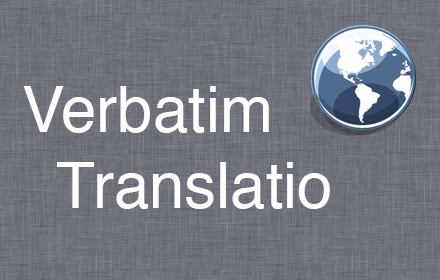
<style>
.page{position:relative;width:440px;height:280px}
.page>*{position:absolute;margin:0}
.t1{font:63.5px "Helvetica";color:#ffffff}
</style>
<div class="page">
<p class="t1" style="left:23px;top:86px;width:307px;height:123px">Verbatim<br>  Translatio</p>
</div>
